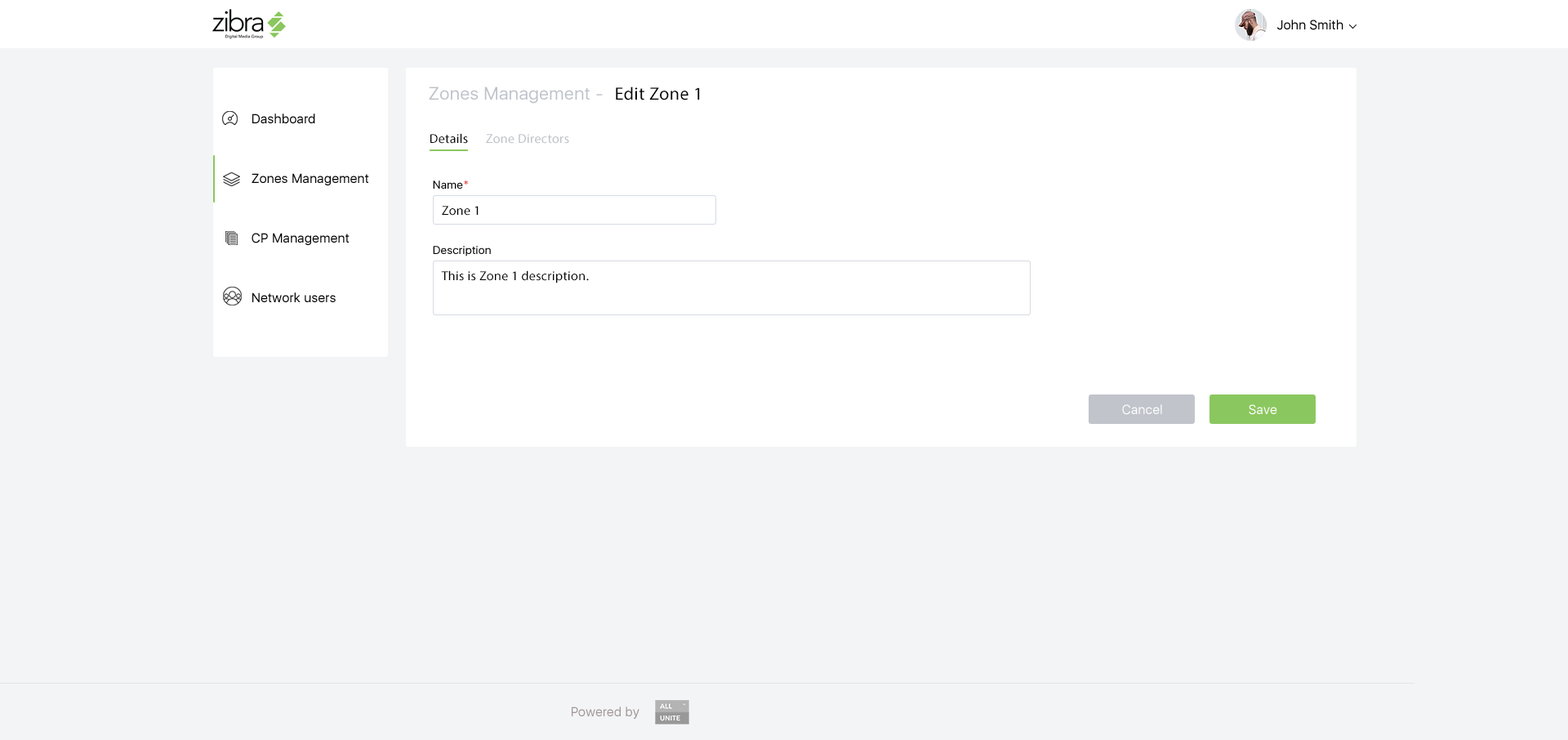
<style>
.page{position:relative;width:1568px;height:740px;background:#f3f4f6}
.page>*{position:absolute;margin:0}
.t1{font:13.1px "SFUIDisplay-Regular";letter-spacing:0.02em;color:#000000}
.t2{font:18px "SFUIDisplay-Regular";letter-spacing:0.02em;color:#bdc2ca}
.t3{font:18px "SFUIDisplay-Regular";letter-spacing:0.02em;color:#000000}
.t4{font:18px "MyriadPro-Regular";letter-spacing:0.02em;color:#000000}
.t5{font:13.1px/59.6px "SFUIDisplay-Regular";letter-spacing:0.02em;color:#000000}
.t6{font:13.1px "MyriadPro-Regular";letter-spacing:0.02em;color:#000000}
.t7{font:13.1px "MyriadPro-Regular";letter-spacing:0.02em;color:#bdc2ca}
.t8{font:11.4px "SFUIDisplay-Regular";letter-spacing:0.02em;color:#000000}
.t9{font:11.4px "SFUIDisplay-Regular";letter-spacing:0.02em;color:#e23a3a}
.t10{font:13.1px "SFUIDisplay-Regular";letter-spacing:0.02em;color:#ffffff}
.t11{font:13.1px "SFUIDisplay-Regular";letter-spacing:0.02em;color:#a19696}
</style>
<div class="page">
<p class="t1" style="left:1277px;top:20px;width:66px;height:10px">John Smith</p>
<p class="t2" style="left:429px;top:87px;width:174px;height:17px"><span class="t3"> </span>- Zones Management</p>
<p class="t4" style="left:616px;top:87px;width:84px;height:13px">Edit Zone 1</p>
<p class="t5" style="left:252px;top:114px;width:117px;height:188px;text-align:right">Dashboard<br>Zones Management<br>CP Management<br>Network users</p>
<p class="t6" style="left:430px;top:133px;width:38px;height:11px">Details</p>
<p class="t7" style="left:486px;top:134px;width:83px;height:10px">Zone Directors</p>
<p class="t8" style="left:433px;top:180px;width:35px;height:9px"><span class="t9">*</span>Name</p>
<p class="t6" style="left:442px;top:206px;width:37px;height:10px">Zone 1</p>
<p class="t8" style="left:433px;top:246px;width:58px;height:10px">Description</p>
<p class="t6" style="left:441px;top:270px;width:148px;height:13px">.This is Zone 1 description</p>
<p class="t10" style="left:1122px;top:404px;width:40px;height:11px">Cancel</p>
<p class="t10" style="left:1249px;top:404px;width:28px;height:11px">Save</p>
<p class="t11" style="left:572px;top:706px;width:67px;height:13px">Powered by</p>
</div>
